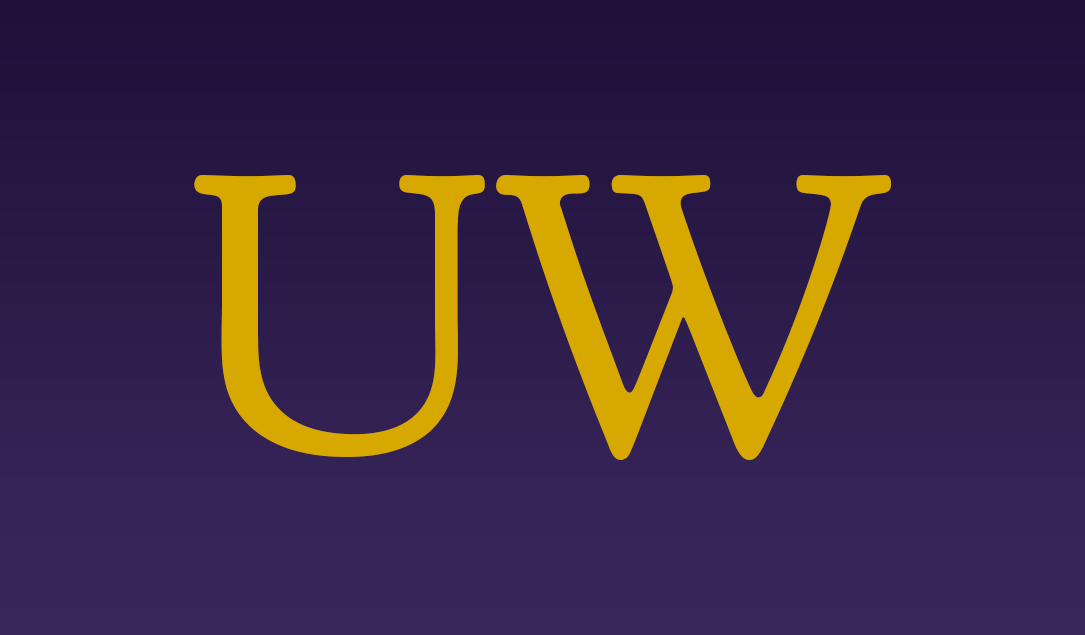
<style>
.page{position:relative;width:1085px;height:635px}
.page>*{position:absolute;margin:0}
.t1{font:400px "GoudyBookletter1911";color:#d7a900}
</style>
<div class="page">
<p class="t1" style="left:194px;top:175px;width:698px;height:285px">UW</p>
</div>
